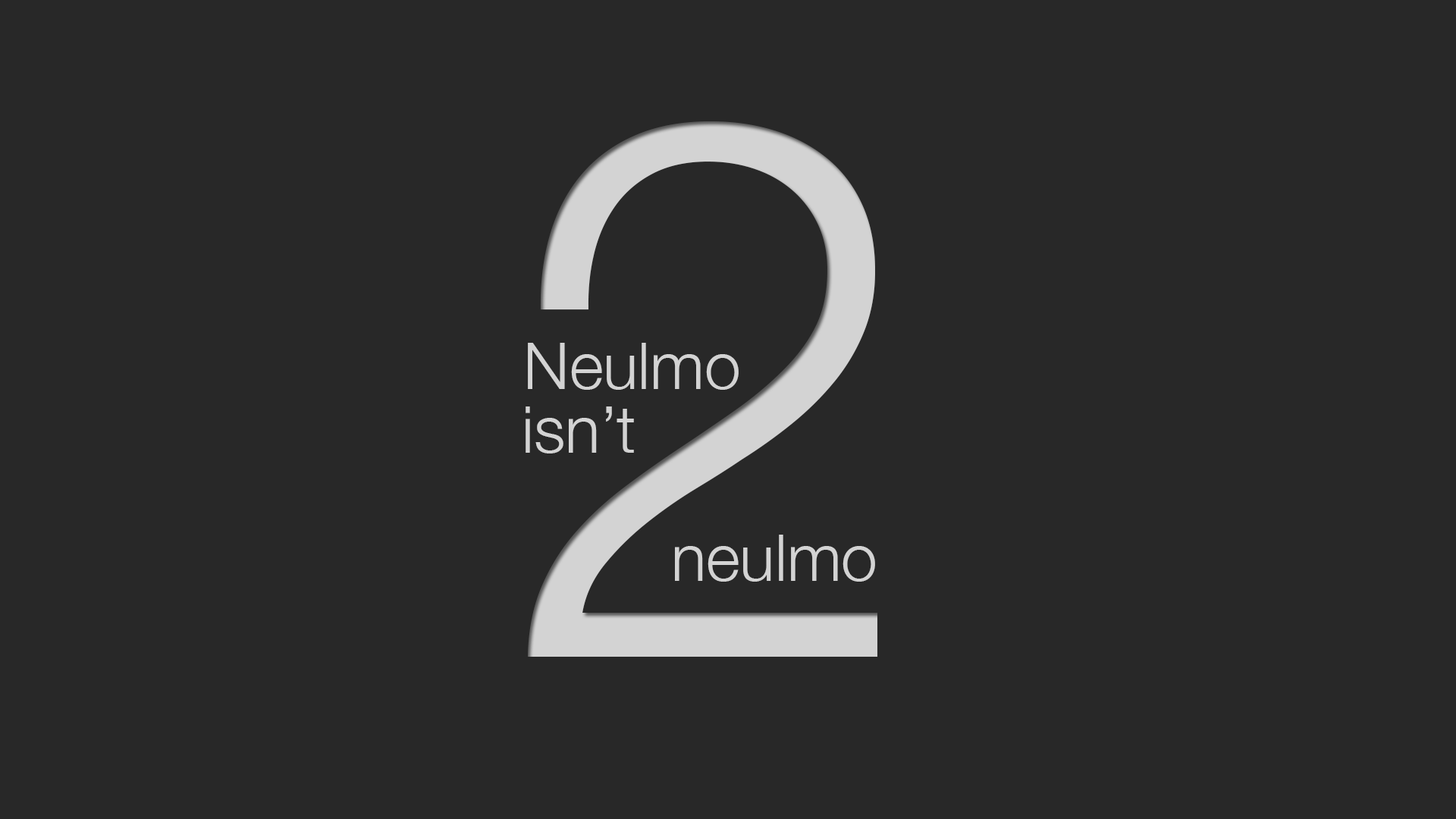
<style>
.page{position:relative;width:1456px;height:819px;background:#282828}
.page>*{position:absolute;margin:0}
.t1{font:758.3px "HelveticaNeue-Light";color:#d3d3d3}
.t2{font:65.2px "HelveticaNeue-Light";color:#d3d3d3}
</style>
<div class="page">
<p class="t1" style="left:528px;top:121px;width:349px;height:536px">2</p>
<p class="t2" style="left:528px;top:343px;width:211px;height:47px">Neulmo</p>
<p class="t2" style="left:526px;top:406px;width:86px;height:47px">isn’</p>
<p class="t2" style="left:617px;top:409px;width:17px;height:44px">t</p>
<p class="t2" style="left:675px;top:535px;width:200px;height:47px">neulmo</p>
</div>
